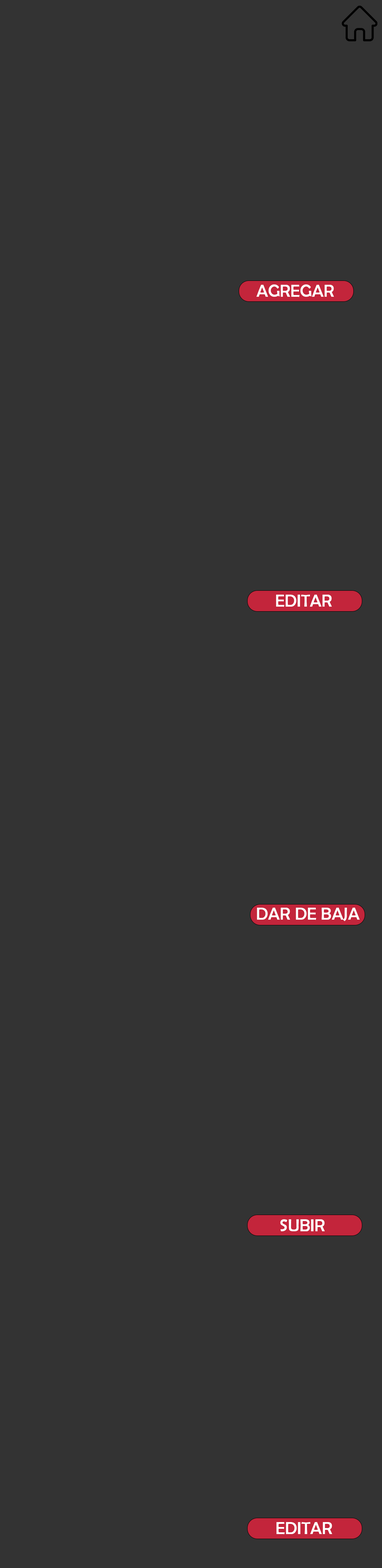
<style>
.page{position:relative;width:382px;height:1568px;background:#333333}
.page>*{position:absolute;margin:0}
.t1{font:17.7px "BerlinSansFB-Reg";color:#ffffff;text-transform:uppercase}
</style>
<div class="page">
<p class="t1" style="left:256px;top:284px;width:78px;height:13px">AGREGAR</p>
<p class="t1" style="left:276px;top:594px;width:55px;height:13px">EDITAR</p>
<p class="t1" style="left:257px;top:907px;width:102px;height:14px">Dar de baja</p>
<p class="t1" style="left:280px;top:1219px;width:44px;height:12px">Subir</p>
<p class="t1" style="left:276px;top:1522px;width:56px;height:12px">Editar</p>
</div>
